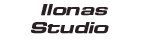
<style>
.page{position:relative;width:143px;height:42px;background:#ffffff}
.page>*{position:absolute;margin:0}
.t1{font:15.3px "EurofontExtendedC-BoldItalic";color:#2a2023;font-weight:bold;scale:1.17 1}
</style>
<div class="page">
<p class="t1" style="left:31px;top:4px;width:78px;height:30px;text-align:center">Ilonas <br>Studio</p>
</div>
